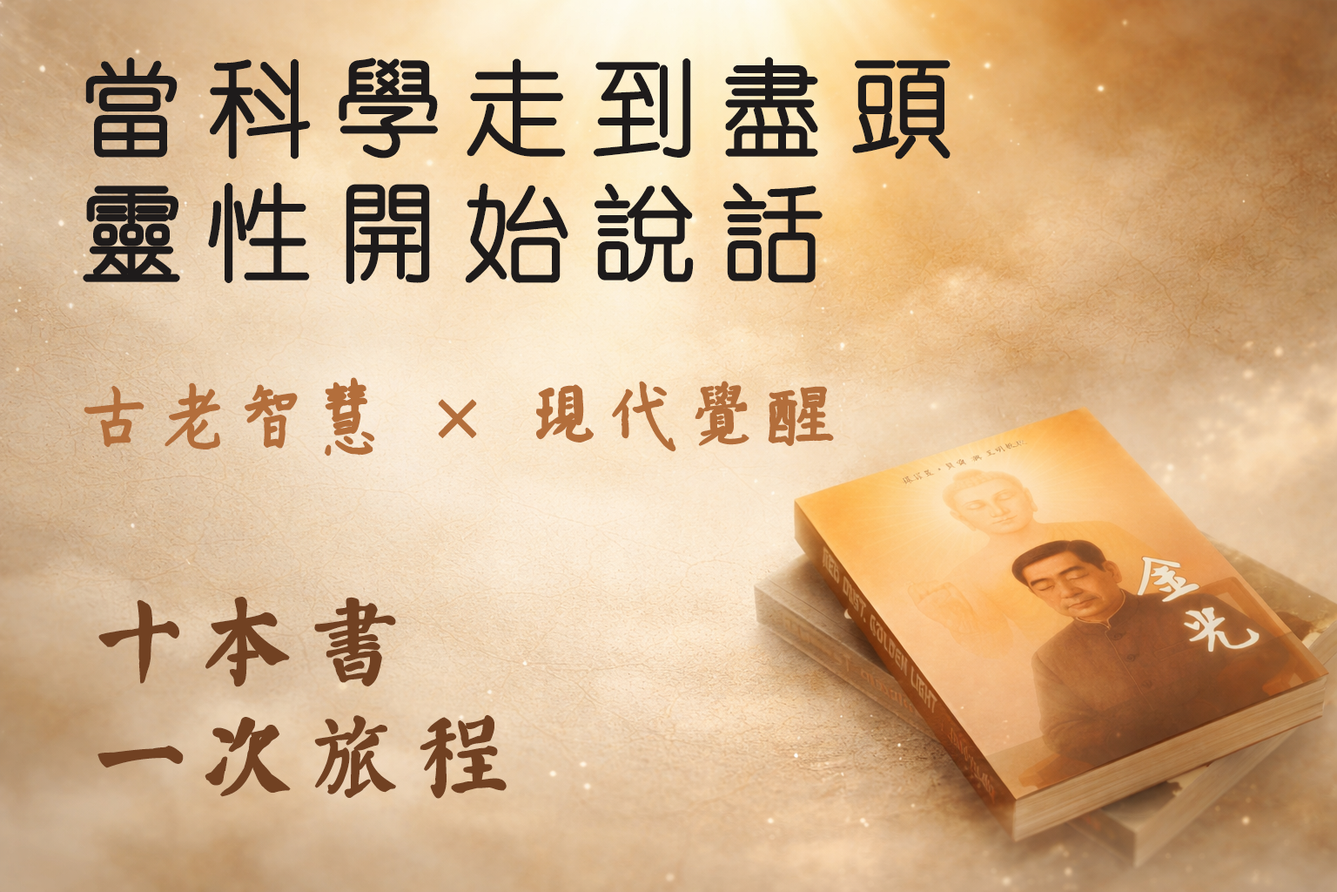
<style>
.page{position:relative;width:1337px;height:892px}
.page>*{position:absolute;margin:0}
.t1{font:104.5px "YouYuan";letter-spacing:0.2em;color:#1e1b1b;font-weight:bold}
.t2{font:69.7px "ÊéÌå·»ÕÔ¾Å½­¸Ö±Ê¿¬Êé";letter-spacing:0.1em;color:#b36e3b;font-weight:bold}
.t3{font:69.7px "øów·»îów©I";letter-spacing:0.1em;color:#b36e3b;font-weight:bold}
.t4{font:95.8px "øów·»îów©I";letter-spacing:0.1em;color:#714122;font-weight:bold}
</style>
<div class="page">
<p class="t1" style="left:83px;top:57px;width:868px;height:227px">當科學走到盡頭<br>靈性開始說話</p>
<p class="t2" style="left:84px;top:377px;width:750px;height:79px">古老智慧 × <span class="t3">現</span>代<span class="t3">覺</span>醒</p>
<p class="t4" style="left:98px;top:596px;width:409px;height:202px">十本書 <br>一次旅程</p>
</div>
